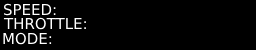
<style>
.page{position:relative;width:256px;height:50px;background:#000000}
.page>*{position:absolute;margin:0}
.t1{font:15px "DejaVuSans";color:#ffffff}
</style>
<div class="page">
<p class="t1" style="left:3px;top:3px;width:53px;height:13px">SPEED:</p>
<p class="t1" style="left:3px;top:17px;width:83px;height:13px">THROTTLE:</p>
<p class="t1" style="left:3px;top:32px;width:49px;height:13px">MODE:</p>
</div>
